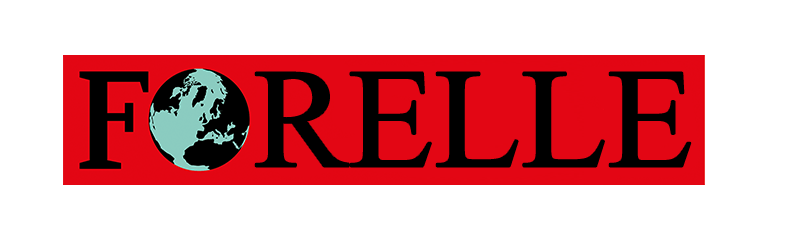
<style>
.page{position:relative;width:793px;height:240px;background:#ffffff}
.page>*{position:absolute;margin:0}
.t1{font:141.5px "TimesNewRomanPSMT";color:#000000}
</style>
<div class="page">
<p class="t1" style="left:255px;top:72px;width:436px;height:95px">RELLE</p>
</div>
